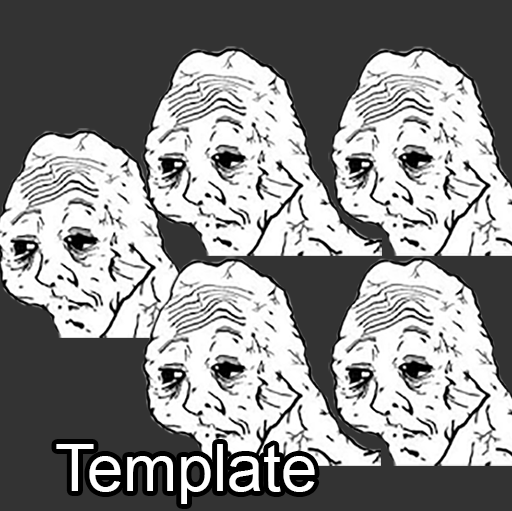
<style>
.page{position:relative;width:512px;height:511px;background:#333333}
.page>*{position:absolute;margin:0}
.t1{font:64.6px "ArialMT";color:#fefefe}
</style>
<div class="page">
<p class="t1" style="left:56px;top:444px;width:259px;height:60px">Template</p>
</div>
